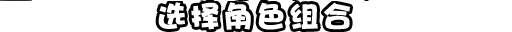
<style>
.page{position:relative;width:512px;height:32px;background:#ffffff}
.page>*{position:absolute;margin:0}
.t1{font:30px "DFPHaiBaoW12";letter-spacing:0.1em;color:#ffffff}
</style>
<div class="page">
<p class="t1" style="left:158px;top:2px;width:192px;height:28px">选择角色组合</p>
</div>
